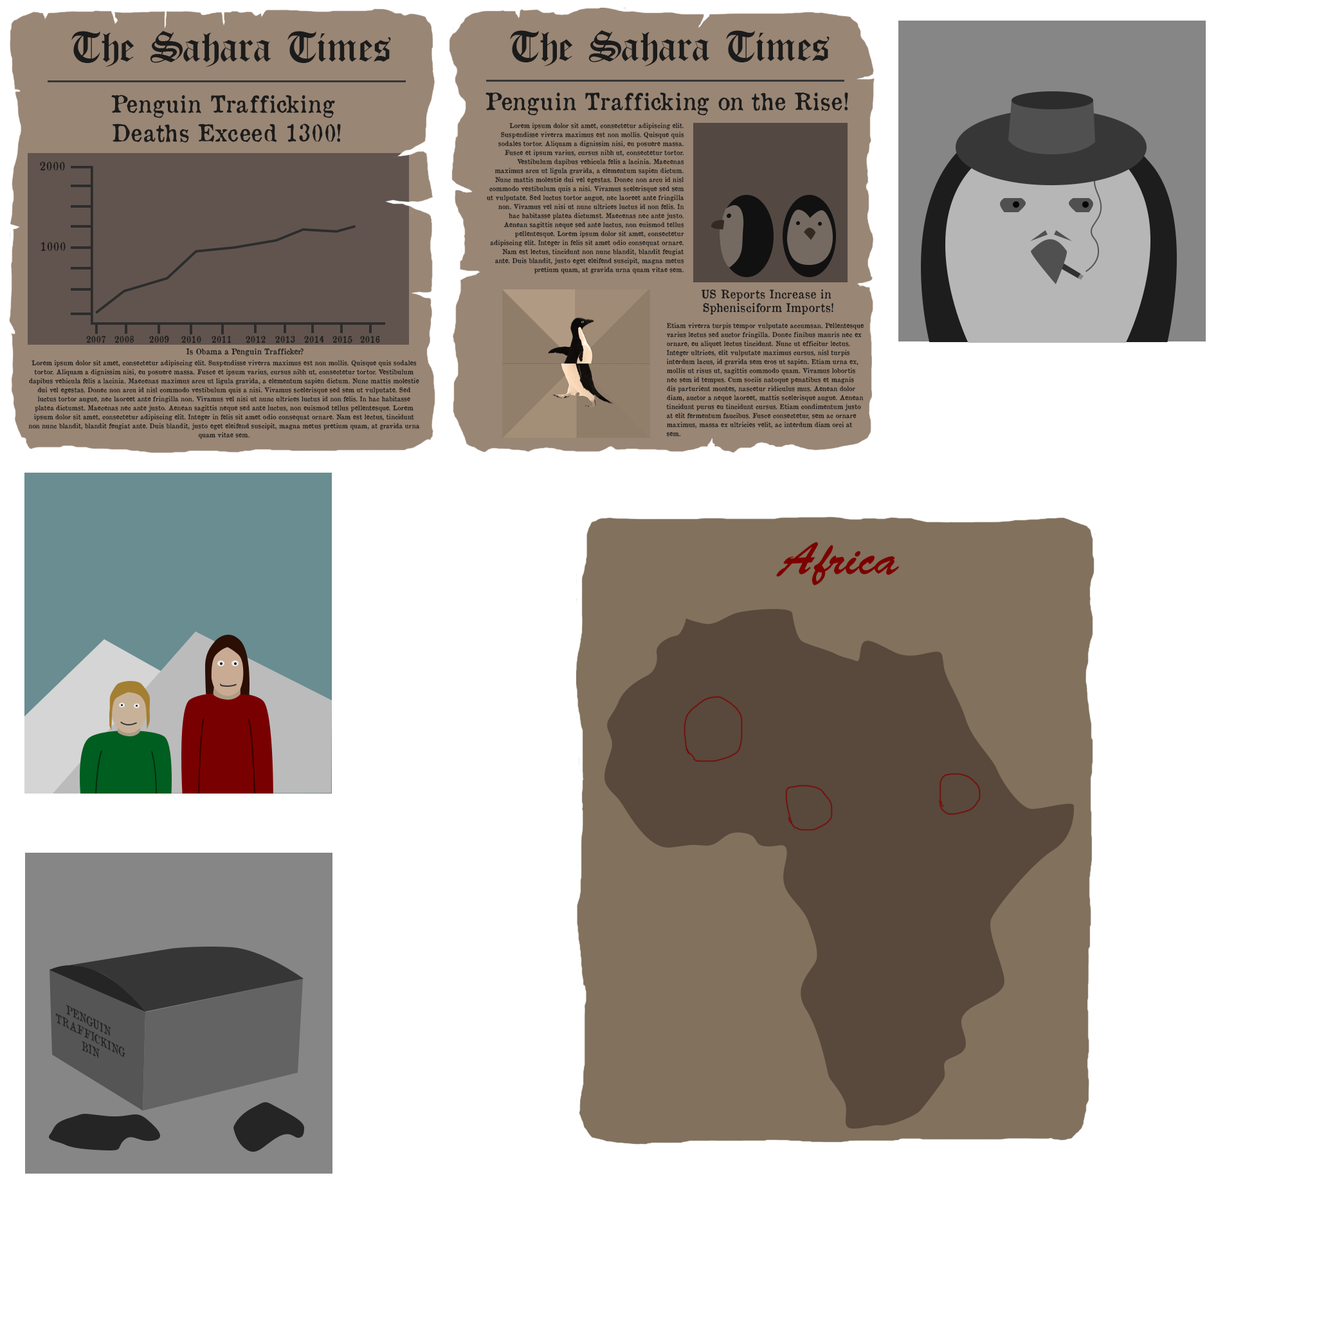
<style>
.page{position:relative;width:1317px;height:1317px;background:#ffffff}
.page>*{position:absolute;margin:0}
.t1{font:46.3px "OldLondon";color:#1b1b1b}
.t2{font:23.1px/28.9px "OldNewspaperTypes";color:#1b1b1b}
.t3{font:23.1px "OldNewspaperTypes";color:#1b1b1b}
.t4{font:6.4px/9px "OldNewspaperTypes";color:#1b1b1b}
.t5{font:11.6px "OldNewspaperTypes";color:#1b1b1b}
.t6{font:11.6px/13.5px "OldNewspaperTypes";color:#1b1b1b}
.t7{font:9px "OldNewspaperTypes";color:#1b1b1b}
.t8{font:7.7px "OldNewspaperTypes";color:#1b1b1b}
.t9{font:46.3px "BrushScriptStd";color:#7c0000}
.t10{font:12px/14px "OldNewspaperTypes";color:#252525;scale:0.84 1}
</style>
<div class="page">
<p class="t1" style="left:71px;top:31px;width:320px;height:36px">The Sahara Times</p>
<p class="t1" style="left:510px;top:30px;width:319px;height:36px">The Sahara Times</p>
<p class="t2" style="left:111px;top:94px;width:230px;height:49px;text-align:center">Penguin Trafficking <br>Deaths Exceed 1300!</p>
<p class="t3" style="left:485px;top:92px;width:363px;height:24px">Penguin Trafficking on the Rise!</p>
<p class="t4" style="left:487px;top:123px;width:197px;height:151px;text-align:right">Lorem ipsum dolor sit amet, consectetur adipiscing elit. Suspendisse viverra maximus est non mollis. Quisque quis sodales tortor. Aliquam a dignissim nisi, eu posuere massa. Fusce et ipsum varius, cursus nibh ut, consectetur tortor. Vestibulum dapibus vehicula felis a lacinia. Maecenas maximus arcu ut ligula gravida, a elementum sapien dictum. Nunc mattis molestie dui vel egestas. Donec non arcu id nisl commodo vestibulum quis a nisi. Vivamus scelerisque sed sem ut vulputate. Sed luctus tortor augue, nec laoreet ante fringilla non. Vivamus vel nisi ut nunc ultrices luctus id non felis. In hac habitasse platea dictumst. Maecenas nec ante justo. Aenean sagittis neque sed ante luctus, non euismod tellus pellentesque. Lorem ipsum dolor sit amet, consectetur adipiscing elit. Integer in felis sit amet odio consequat ornare. Nam est lectus, tincidunt non nunc blandit, blandit feugiat ante. Duis blandit, justo eget eleifend suscipit, magna metus pretium quam, at gravida urna quam vitae sem.</p>
<p class="t5" style="left:40px;top:161px;width:25px;height:10px">2000</p>
<p class="t5" style="left:40px;top:242px;width:26px;height:9px">1000</p>
<p class="t6" style="left:701px;top:289px;width:132px;height:26px;text-align:center">US Reports Increase in <br>Sphenisciform Imports!</p>
<p class="t4" style="left:666px;top:323px;width:197px;height:114px">Etiam viverra turpis tempor vulputate accumsan. Pellentesque varius lectus sed auctor fringilla. Donec finibus mauris nec ex ornare, eu aliquet lectus tincidunt. Nunc ut efficitur lectus. Integer ultrices, elit vulputate maximus cursus, nisl turpis interdum lacus, id gravida sem eros ut sapien. Etiam urna ex, mollis ut risus ut, sagittis commodo quam. Vivamus lobortis nec sem id tempus. Cum sociis natoque penatibus et magnis dis parturient montes, nascetur ridiculus mus. Aenean dolor diam, auctor a neque laoreet, mattis scelerisque augue. Aenean tincidunt purus eu tincidunt cursus. Etiam condimentum justo at elit fermentum faucibus. Fusce consectetur, sem ac ornare maximus, massa ex ultricies velit, ac interdum diam orci at sem.</p>
<p class="t7" style="left:86px;top:336px;width:20px;height:7px">2007</p>
<p class="t7" style="left:114px;top:336px;width:20px;height:7px">2008</p>
<p class="t7" style="left:149px;top:336px;width:20px;height:7px">2009</p>
<p class="t7" style="left:181px;top:336px;width:20px;height:7px">2010</p>
<p class="t7" style="left:212px;top:336px;width:19px;height:7px">2011</p>
<p class="t7" style="left:246px;top:336px;width:20px;height:7px">2012</p>
<p class="t7" style="left:275px;top:336px;width:20px;height:7px">2013</p>
<p class="t7" style="left:304px;top:336px;width:20px;height:7px">2014</p>
<p class="t7" style="left:332px;top:336px;width:20px;height:7px">2015</p>
<p class="t7" style="left:360px;top:336px;width:20px;height:7px">2016</p>
<p class="t8" style="left:186px;top:348px;width:117px;height:8px">Is Obama a Penguin Trafficker?</p>
<p class="t4" style="left:28px;top:360px;width:392px;height:79px;text-align:center">Lorem ipsum dolor sit amet, consectetur adipiscing elit. Suspendisse viverra maximus est non mollis. Quisque quis sodales tortor. Aliquam a dignissim nisi, eu posuere massa. Fusce et ipsum varius, cursus nibh ut, consectetur tortor. Vestibulum dapibus vehicula felis a lacinia. Maecenas maximus arcu ut ligula gravida, a elementum sapien dictum. Nunc mattis molestie dui vel egestas. Donec non arcu id nisl commodo vestibulum quis a nisi. Vivamus scelerisque sed sem ut vulputate. Sed luctus tortor augue, nec laoreet ante fringilla non. Vivamus vel nisi ut nunc ultrices luctus id non felis. In hac habitasse platea dictumst. Maecenas nec ante justo. Aenean sagittis neque sed ante luctus, non euismod tellus pellentesque. Lorem ipsum dolor sit amet, consectetur adipiscing elit. Integer in felis sit amet odio consequat ornare. Nam est lectus, tincidunt non nunc blandit, blandit feugiat ante. Duis blandit, justo eget eleifend suscipit, magna metus pretium quam, at gravida urna quam vitae sem.</p>
<p class="t9" style="left:776px;top:542px;width:123px;height:43px">Africa</p>
<p class="t10" style="left:55px;top:1004px;width:70px;height:54px;text-align:center;rotate:28deg">PENGUIN <br>TRAFFICKING<br>BIN</p>
</div>
